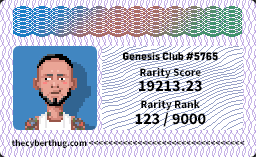
<style>
.page{position:relative;width:256px;height:157px;background:#ffffff}
.page>*{position:absolute;margin:0}
.t1{font:9px "VITRO-CORE-TTF";color:#000000}
.t2{font:10px "NotoSansKR-Black";color:#000000}
.t3{font:14px "NotoSansKR-Black";color:#000000}
.t4{font:8px "NotoSansKR-Black";color:#000000}
</style>
<div class="page">
<p class="t1" style="left:123px;top:52px;width:95px;height:9px">Genesis Club #5765</p>
<p class="t2" style="left:140px;top:67px;width:61px;height:12px">Rarity Score</p>
<p class="t3" style="left:139px;top:80px;width:63px;height:12px">19213.23</p>
<p class="t2" style="left:141px;top:99px;width:59px;height:12px">Rarity Rank</p>
<p class="t3" style="left:135px;top:112px;width:71px;height:15px">123 / 9000</p>
<p class="t4" style="left:11px;top:139px;width:234px;height:9px">thecyberthug.com &lt;&lt;&lt;&lt;&lt;&lt;&lt;&lt;&lt;&lt;&lt;&lt;&lt;&lt;&lt;&lt;&lt;&lt;&lt;&lt;&lt;&lt;&lt;&lt;&lt;&lt;&lt;&lt;&lt;&lt;&lt;&lt;</p>
</div>
